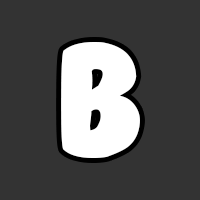
<style>
.page{position:relative;width:200px;height:200px;background:#333333}
.page>*{position:absolute;margin:0}
.t1{font:150px "BubbleGum";color:#ffffff}
</style>
<div class="page">
<p class="t1" style="left:61px;top:42px;width:79px;height:116px">B</p>
</div>
